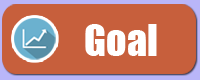
<style>
.page{position:relative;width:200px;height:80px;background:#c75f3c}
.page>*{position:absolute;margin:0}
.t1{font:40px "Impact";color:#ffffff}
</style>
<div class="page">
<p class="t1" style="left:85px;top:24px;width:72px;height:32px">Goal</p>
</div>
